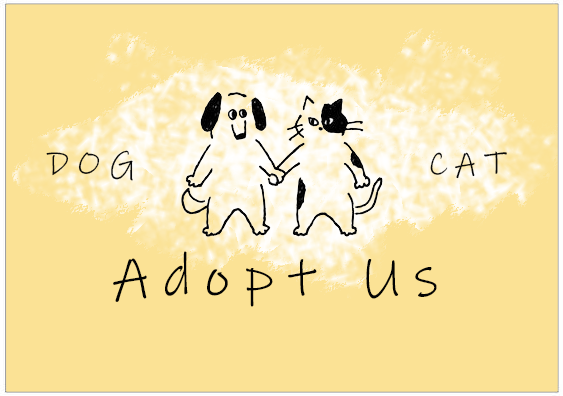
<style>
.page{position:relative;width:563px;height:396px;background:#fbe295}
.page>*{position:absolute;margin:0}
.t1{font:33.3px "InkFree";letter-spacing:0.25em;color:#0a0a0a}
.t2{font:57.4px "InkFree";letter-spacing:0.25em;color:#030303}
</style>
<div class="page">
<p class="t1" style="left:46px;top:150px;width:87px;height:31px">DOG</p>
<p class="t1" style="left:430px;top:151px;width:77px;height:28px">CAT</p>
<p class="t2" style="left:113px;top:251px;width:324px;height:56px">Adopt Us</p>
</div>
